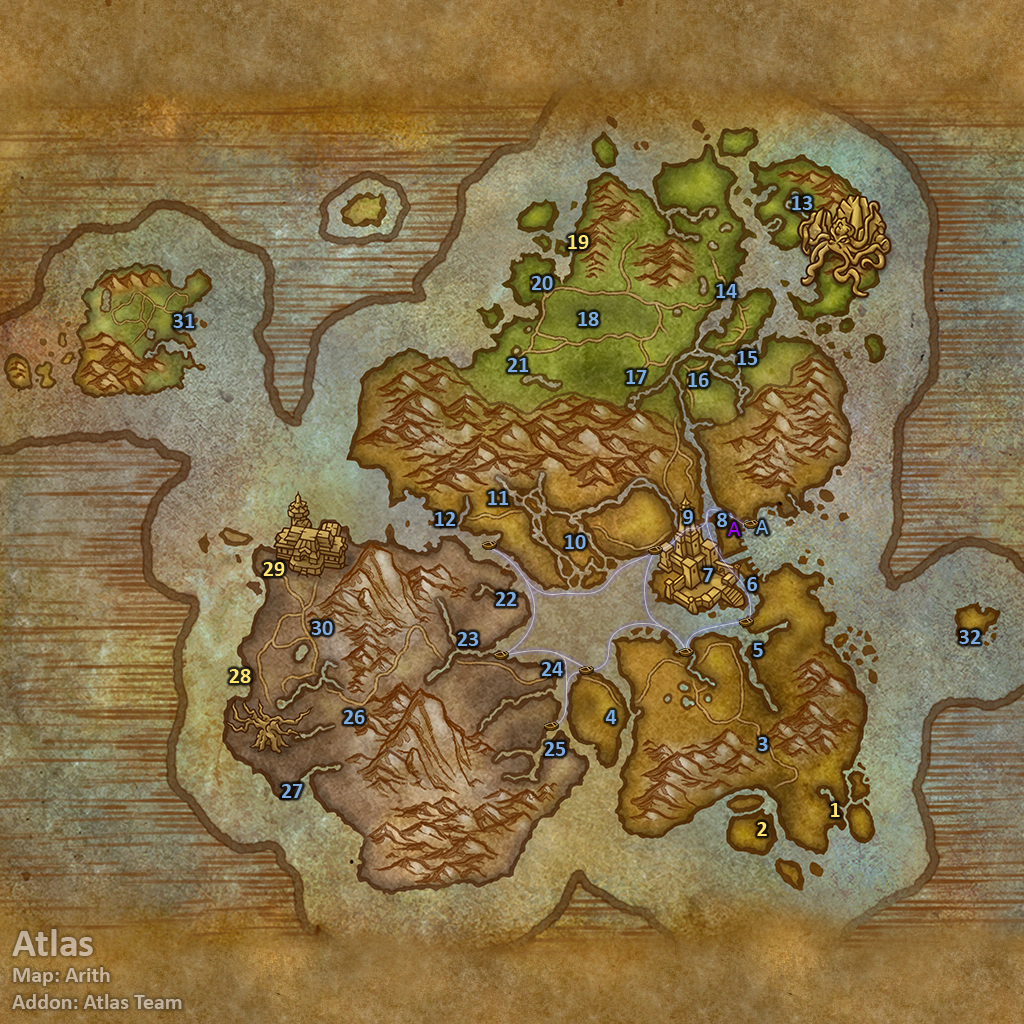
<style>
.page{position:relative;width:1024px;height:1024px}
.page>*{position:absolute;margin:0}
.t1{font:22px "Calibri-Bold";color:#7babe0}
.t2{font:22px "Calibri-Bold";color:#fee570}
.t3{font:22px "Calibri";color:#7babe0}
.t4{font:22px "Calibri";color:#9900ff}
.t5{font:22px "Calibri-Bold";color:#c4b29b}
.t6{font:40px "Calibri-Bold";color:#c4b29b}
</style>
<div class="page">
<p class="t1" style="left:792px;top:196px;width:21px;height:14px">13</p>
<p class="t2" style="left:568px;top:235px;width:21px;height:14px">19</p>
<p class="t1" style="left:532px;top:276px;width:21px;height:14px">20</p>
<p class="t1" style="left:716px;top:284px;width:21px;height:14px">14</p>
<p class="t1" style="left:173px;top:314px;width:22px;height:14px">31</p>
<p class="t1" style="left:578px;top:312px;width:21px;height:14px">18</p>
<p class="t1" style="left:737px;top:351px;width:21px;height:14px">15</p>
<p class="t1" style="left:508px;top:358px;width:21px;height:14px">21</p>
<p class="t1" style="left:626px;top:370px;width:21px;height:14px">17</p>
<p class="t1" style="left:688px;top:373px;width:21px;height:14px">16</p>
<p class="t1" style="left:488px;top:491px;width:21px;height:14px">11</p>
<p class="t1" style="left:683px;top:510px;width:10px;height:14px">9</p>
<p class="t1" style="left:435px;top:512px;width:21px;height:14px">12</p>
<p class="t1" style="left:717px;top:513px;width:10px;height:14px">8</p>
<p class="t3" style="left:756px;top:520px;width:13px;height:14px">A</p>
<p class="t4" style="left:728px;top:522px;width:13px;height:14px">A</p>
<p class="t1" style="left:565px;top:535px;width:21px;height:14px">10</p>
<p class="t2" style="left:263px;top:562px;width:22px;height:14px">29</p>
<p class="t1" style="left:703px;top:568px;width:10px;height:14px">7</p>
<p class="t1" style="left:747px;top:577px;width:10px;height:14px">6</p>
<p class="t1" style="left:496px;top:592px;width:21px;height:14px">22</p>
<p class="t1" style="left:311px;top:621px;width:22px;height:14px">30</p>
<p class="t1" style="left:959px;top:630px;width:22px;height:14px">32</p>
<p class="t1" style="left:458px;top:632px;width:21px;height:14px">23</p>
<p class="t1" style="left:753px;top:643px;width:10px;height:14px">5</p>
<p class="t1" style="left:542px;top:662px;width:21px;height:14px">24</p>
<p class="t2" style="left:229px;top:669px;width:22px;height:14px">28</p>
<p class="t1" style="left:344px;top:710px;width:21px;height:14px">26</p>
<p class="t1" style="left:605px;top:710px;width:12px;height:14px">4</p>
<p class="t1" style="left:758px;top:737px;width:10px;height:14px">3</p>
<p class="t1" style="left:545px;top:742px;width:21px;height:14px">25</p>
<p class="t1" style="left:282px;top:784px;width:21px;height:14px">27</p>
<p class="t2" style="left:831px;top:803px;width:9px;height:14px">1</p>
<p class="t2" style="left:757px;top:822px;width:10px;height:14px">2</p>
<p class="t5" style="left:12px;top:929px;width:170px;height:80px"><span class="t6">Atlas<br></span>Map: Arith<br>Addon: Atlas Team</p>
</div>
